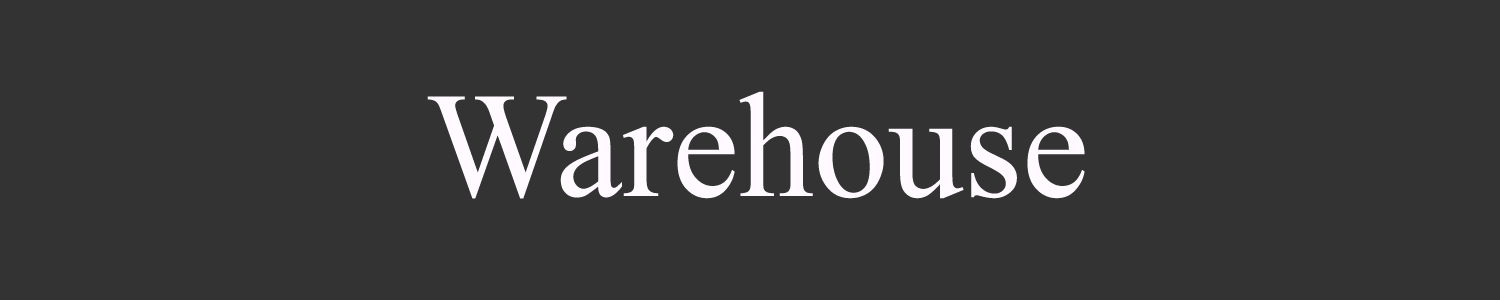
<style>
.page{position:relative;width:1500px;height:300px;background:#333333}
.page>*{position:absolute;margin:0}
.t1{font:150px "TimesNewRomanPSMT";color:#fffaff}
</style>
<div class="page">
<p class="t1" style="left:427px;top:91px;width:658px;height:108px">Warehouse</p>
</div>
